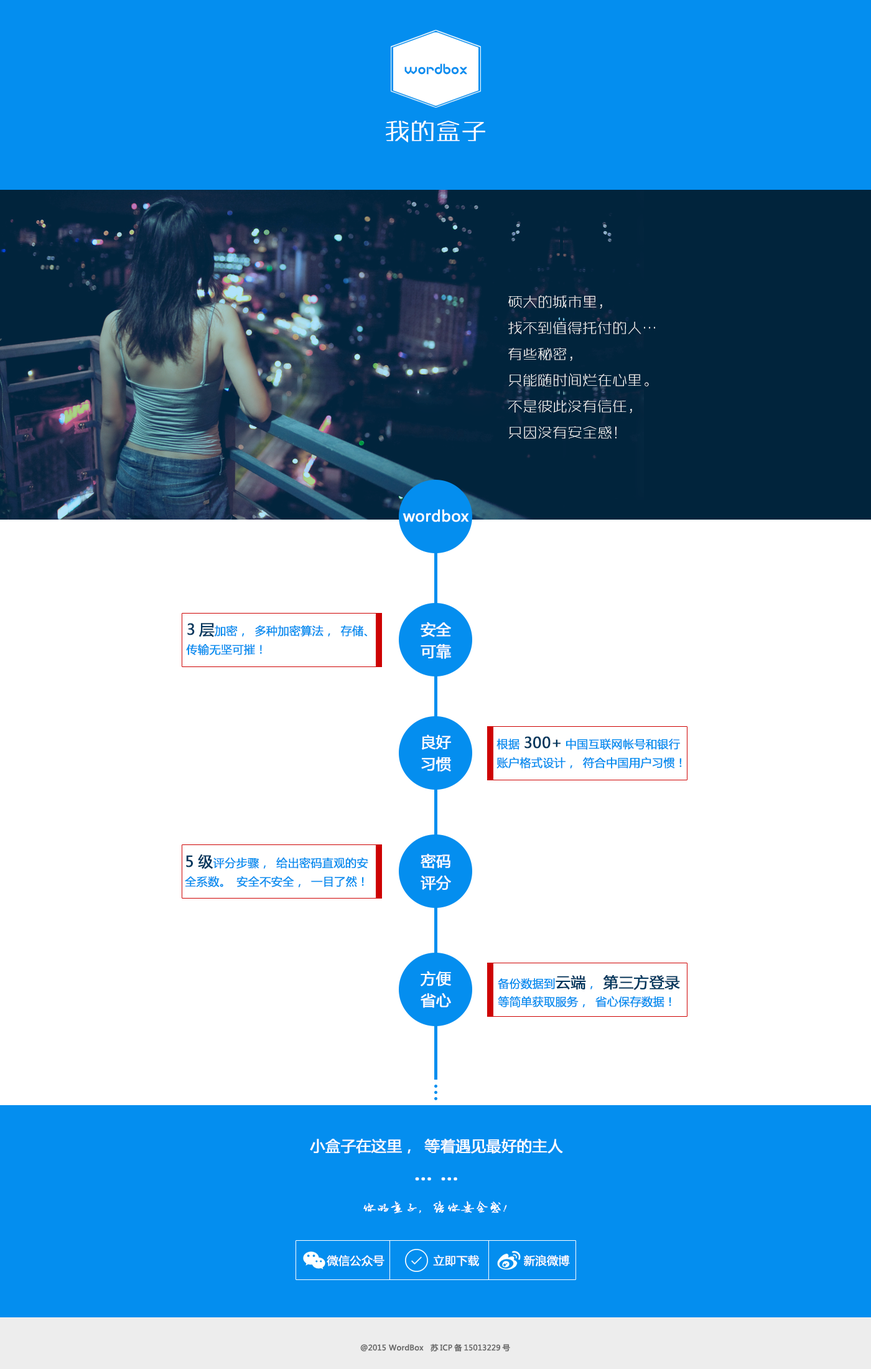
<style>
.page{position:relative;width:871px;height:1369px;background:#ffffff}
.page>*{position:absolute;margin:0}
.t1{font:15.4px "BabyFace";color:#048eef}
.t2{font:24.9px "BIGruixianti2.0";color:#ffffff;font-weight:bold}
.t3{font:14.9px "BIGruixianti2.0";color:#ffffff}
.t4{font:14.9px "MicrosoftYaHei";color:#ffffff;font-weight:bold}
.t5{font:11.2px/21.8px "MicrosoftYaHei";color:#048eef;font-weight:bold}
.t6{font:14.9px/21.8px "MicrosoftYaHei";color:#00375e;font-weight:bold}
.t7{font:14.9px/21.8px "MicrosoftYaHei";color:#ffffff;font-weight:bold}
.t8{font:14.9px/21.8px "MicrosoftYaHei";color:#01385e;font-weight:bold}
.t9{font:22.4px/21.8px "MicrosoftYaHei";color:#ffffff;font-weight:bold}
.t10{font:13.7px "--";color:#ffffff;font-weight:bold}
.t11{font:11.2px "MicrosoftYaHei";color:#ffffff;font-weight:bold}
.t12{font:7.5px "MicrosoftYaHei";color:#6c6c6c;font-weight:bold}
</style>
<div class="page">
<p class="t1" style="left:404px;top:63px;width:63px;height:12px">wordbox</p>
<p class="t2" style="left:386px;top:121px;width:99px;height:21px">我的盒子</p>
<p class="t3" style="left:508px;top:295px;width:147px;height:144px">硕大的城市里，<br>找不到值得托付的人…<br>有些秘密，<br>只能随时间烂在心里。<br>不是彼此没有信任，<br>只因没有安全感！</p>
<p class="t4" style="left:403px;top:509px;width:66px;height:13px">wordbox</p>
<p class="t5" style="left:186px;top:623px;width:182px;height:32px"><span class="t6">3层</span>加密，多种加密算法，存储、<br>传输无坚可摧！</p>
<p class="t7" style="left:421px;top:622px;width:30px;height:37px">安全<br>可靠</p>
<p class="t7" style="left:421px;top:734px;width:30px;height:38px">良好<br>习惯</p>
<p class="t5" style="left:497px;top:736px;width:185px;height:32px">根据<span class="t6">300+</span>中国互联网帐号和银行<br>账户格式设计，符合中国用户习惯！</p>
<p class="t5" style="left:185px;top:854px;width:183px;height:33px"><span class="t6">5级</span>评分步骤，给出密码直观的安<br>全系数。安全不安全，一目了然！</p>
<p class="t7" style="left:421px;top:854px;width:30px;height:36px">密码<br>评分</p>
<p class="t7" style="left:421px;top:971px;width:30px;height:37px">方便<br>省心</p>
<p class="t5" style="left:498px;top:974px;width:182px;height:33px">备份数据到<span class="t6">云端</span>，<span class="t8">第三方登录<br></span>等简单获取服务，省心保存数据！</p>
<p class="t7" style="left:310px;top:1139px;width:253px;height:41px;text-align:center">小盒子在这里，等着遇见最好的主人<br><span class="t9">… …</span></p>
<p class="t10" style="left:363px;top:1201px;width:144px;height:12px">你的盒子，给你安全感！</p>
<p class="t11" style="left:327px;top:1255px;width:58px;height:11px">微信公众号</p>
<p class="t11" style="left:433px;top:1254px;width:46px;height:12px">立即下载</p>
<p class="t11" style="left:524px;top:1254px;width:46px;height:12px">新浪微博</p>
<p class="t12" style="left:360px;top:1343px;width:150px;height:8px">@2015 WordBox   苏ICP备15013229号</p>
</div>
